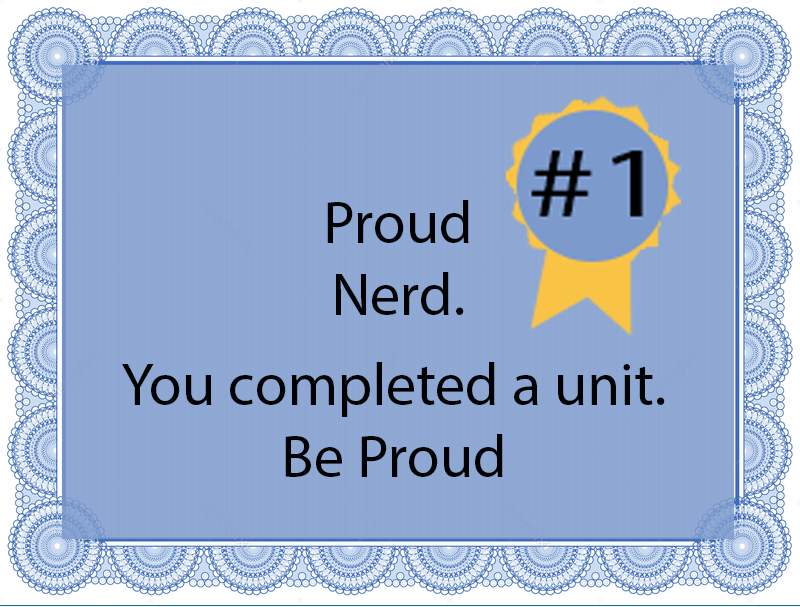
<style>
.page{position:relative;width:800px;height:607px;background:#8fa9d4}
.page>*{position:absolute;margin:0}
.t1{font:60px "MyriadPro-Regular";color:#000102}
</style>
<div class="page">
<p class="t1" style="left:327px;top:200px;width:142px;height:115px;text-align:center">Proud Nerd.</p>
<p class="t1" style="left:122px;top:362px;width:543px;height:115px;text-align:center">You completed a unit. <br>Be Proud</p>
</div>
